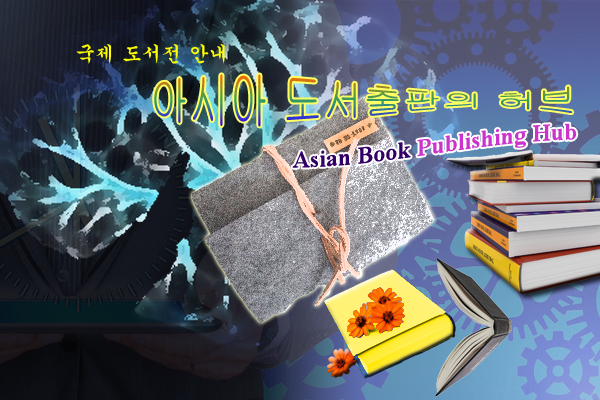
<style>
.page{position:relative;width:600px;height:400px}
.page>*{position:absolute;margin:0}
.t1{font:20px "Gungsuh";color:#ffff00}
.t2{font:24px "TimesNewRomanPS-BoldMT";color:#cc33cc}
.t3{font:24px "TimesNewRomanPS-BoldMT";color:#330066}
</style>
<div class="page">
<p class="t1" style="left:76px;top:44px;width:149px;height:20px">국제 도서전 안내</p>
<p class="t2" style="left:292px;top:123px;width:285px;height:45px"><span class="t3">Asian Book </span>Publishing Hub</p>
</div>
